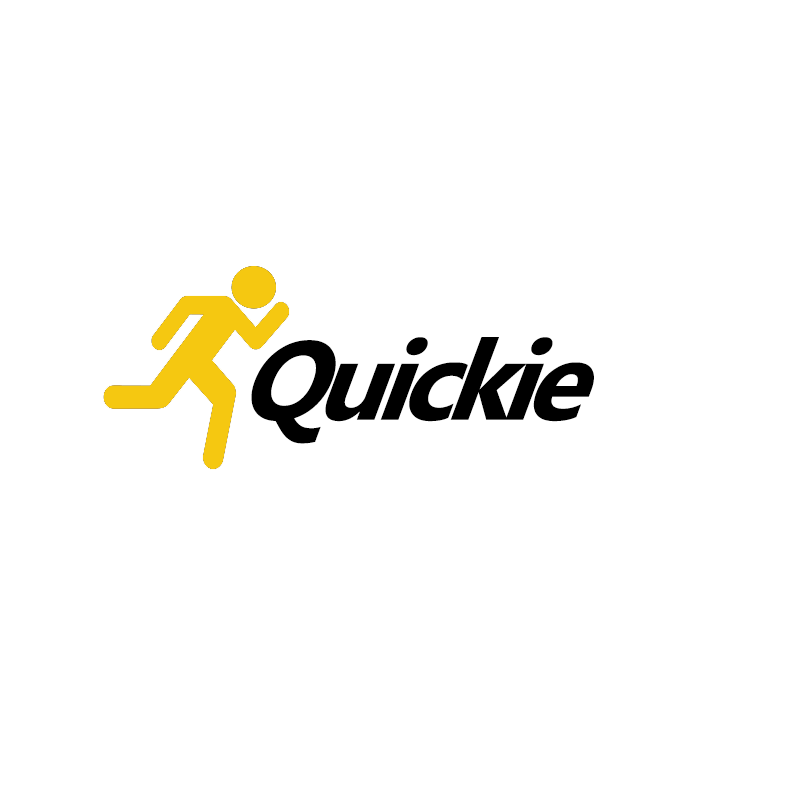
<style>
.page{position:relative;width:800px;height:800px;background:#ffffff}
.page>*{position:absolute;margin:0}
.t1{font:119.1px "Gadugi-Bold";letter-spacing:-0.07em;color:#000000;scale:0.94 1}
</style>
<div class="page">
<p class="t1" style="left:251px;top:337px;width:343px;height:107px">Quickie</p>
</div>
